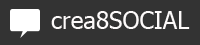
<style>
.page{position:relative;width:200px;height:45px;background:#333333}
.page>*{position:absolute;margin:0}
.t1{font:24px "Tahoma";color:#fdfafa}
</style>
<div class="page">
<p class="t1" style="left:51px;top:11px;width:139px;height:18px">crea8SOCIAL</p>
</div>
